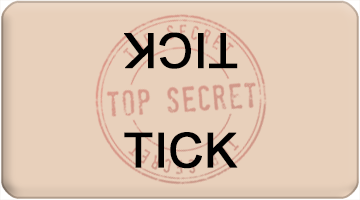
<style>
.page{position:relative;width:360px;height:200px;background:#e8d0bb}
.page>*{position:absolute;margin:0}
.t1{font:48px "ArialMT";color:#000000;font-weight:bold}
</style>
<div class="page">
<p class="t1" style="left:124px;top:32px;width:114px;height:37px;rotate:180deg">TICK</p>
<p class="t1" style="left:124px;top:132px;width:114px;height:37px">TICK</p>
</div>
